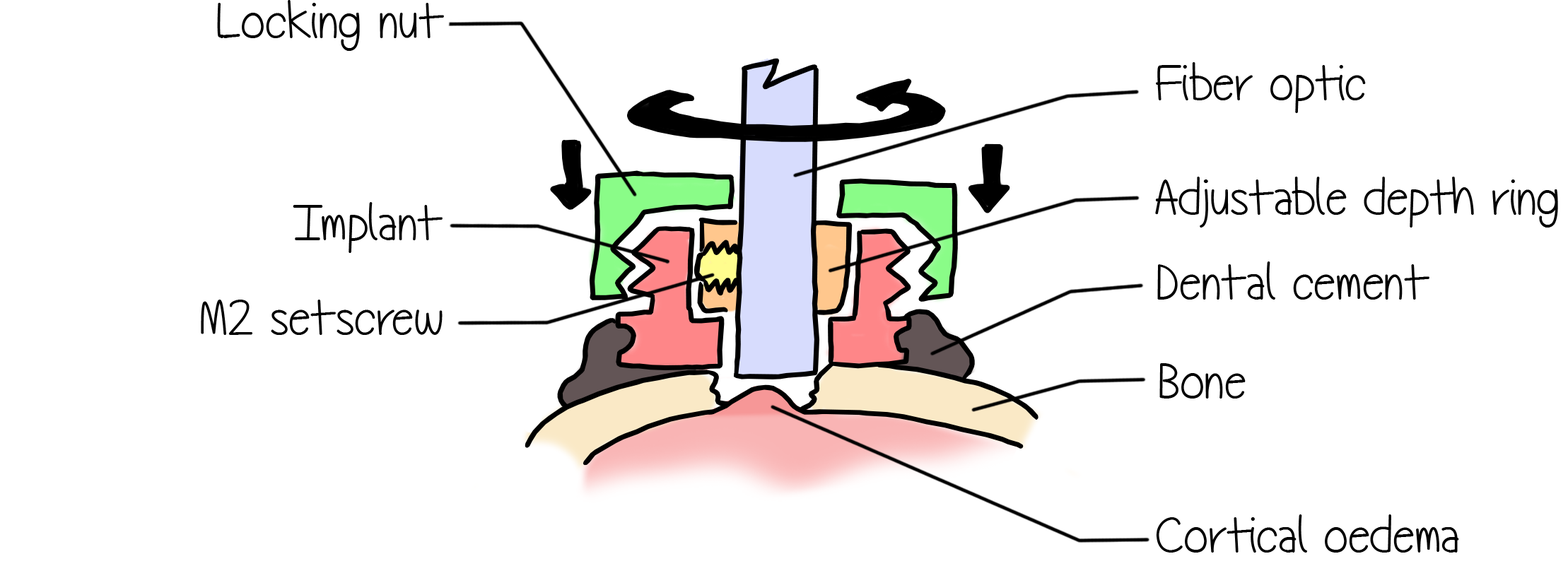
<style>
.page{position:relative;width:1568px;height:578px;background:#ffffff}
.page>*{position:absolute;margin:0}
.t1{font:50.9px "TechnicallyButNotActually";color:#000000}
</style>
<div class="page">
<p class="t1" style="left:217px;top:0px;width:227px;height:51px">Locking nut</p>
<p class="t1" style="left:1156px;top:62px;width:210px;height:51px">Fiber optic</p>
<p class="t1" style="left:1155px;top:177px;width:403px;height:51px">Adjustable depth ring</p>
<p class="t1" style="left:293px;top:202px;width:150px;height:51px">Implant</p>
<p class="t1" style="left:1157px;top:262px;width:272px;height:38px">Dental cement</p>
<p class="t1" style="left:201px;top:300px;width:242px;height:35px">M2 setscrew</p>
<p class="t1" style="left:1159px;top:363px;width:87px;height:36px">Bone</p>
<p class="t1" style="left:1156px;top:515px;width:303px;height:38px">Cortical oedema</p>
</div>
